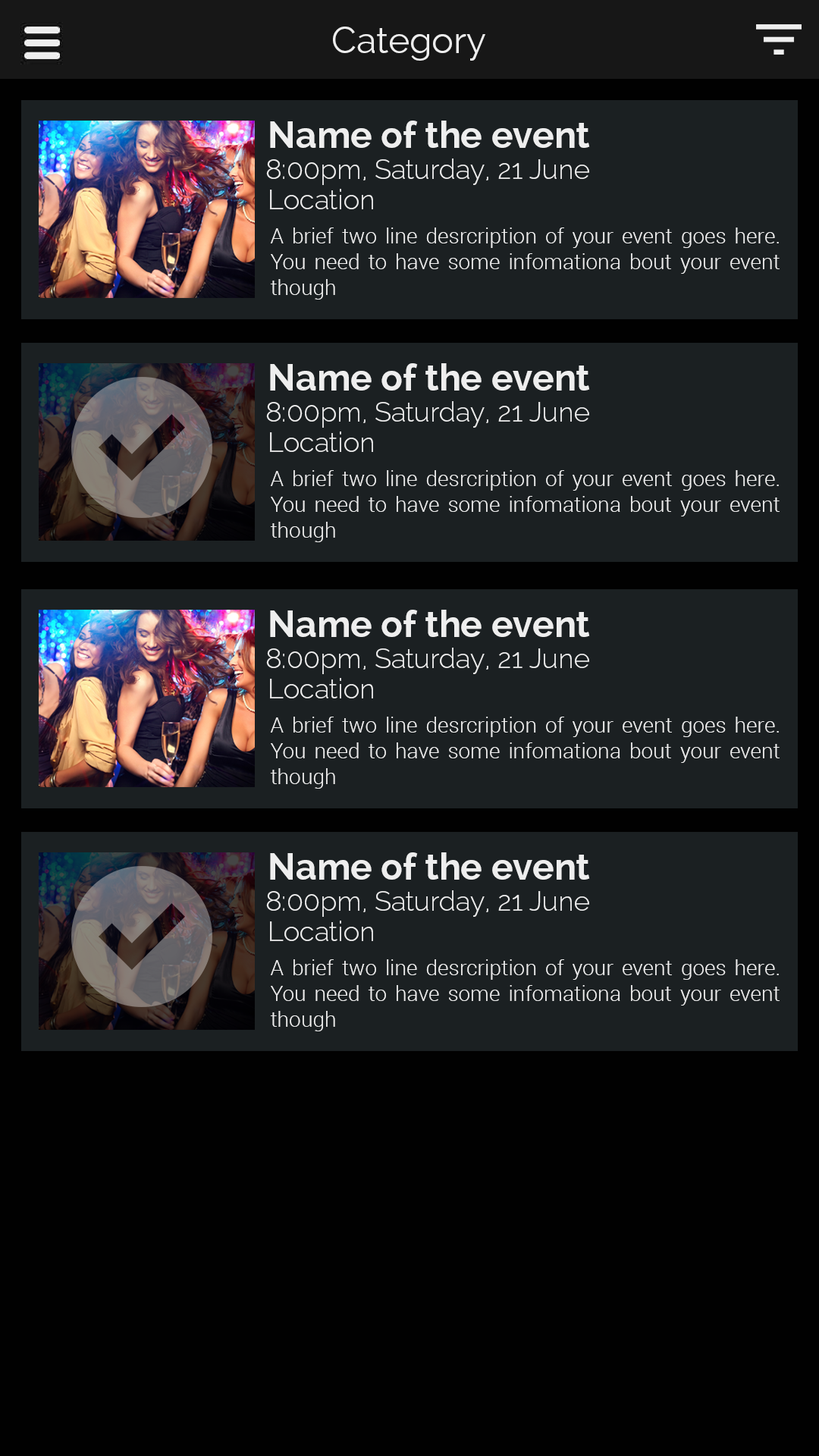
<style>
.page{position:relative;width:819px;height:1456px;background:#1b2022}
.page>*{position:absolute;margin:0}
.t1{font:36.4px "Raleway-Regular";color:#eeeeee}
.t2{font:36.4px "Raleway-Bold";color:#eeeeee}
.t3{font:27.3px "Raleway-Light";color:#eeeeee}
.t4{font:21.2px "Roboto-Light";color:#eeeeee}
</style>
<div class="page">
<p class="t1" style="left:333px;top:27px;width:152px;height:34px">Category</p>
<p class="t2" style="left:270px;top:121px;width:320px;height:27px">Name of the event</p>
<p class="t3" style="left:266px;top:158px;width:323px;height:27px">8:00pm, Saturday, 21 June</p>
<p class="t3" style="left:270px;top:189px;width:103px;height:20px">Location</p>
<p class="t4" style="left:270px;top:227px;width:510px;height:73px;text-align:justify">A brief two line desrcription of your event goes here. You need to have some infomationa bout your event though</p>
<p class="t2" style="left:270px;top:363px;width:320px;height:28px">Name of the event</p>
<p class="t3" style="left:266px;top:401px;width:323px;height:27px">8:00pm, Saturday, 21 June</p>
<p class="t3" style="left:270px;top:431px;width:103px;height:21px">Location</p>
<p class="t4" style="left:270px;top:470px;width:510px;height:72px;text-align:justify">A brief two line desrcription of your event goes here. You need to have some infomationa bout your event though</p>
<p class="t2" style="left:270px;top:610px;width:320px;height:27px">Name of the event</p>
<p class="t3" style="left:266px;top:648px;width:323px;height:26px">8:00pm, Saturday, 21 June</p>
<p class="t3" style="left:270px;top:678px;width:103px;height:20px">Location</p>
<p class="t4" style="left:270px;top:717px;width:510px;height:72px;text-align:justify">A brief two line desrcription of your event goes here. You need to have some infomationa bout your event though</p>
<p class="t2" style="left:270px;top:852px;width:320px;height:28px">Name of the event</p>
<p class="t3" style="left:266px;top:890px;width:323px;height:27px">8:00pm, Saturday, 21 June</p>
<p class="t3" style="left:270px;top:921px;width:103px;height:20px">Location</p>
<p class="t4" style="left:270px;top:959px;width:510px;height:72px;text-align:justify">A brief two line desrcription of your event goes here. You need to have some infomationa bout your event though</p>
</div>
